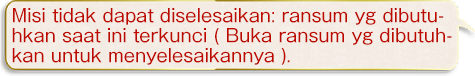
<style>
.page{position:relative;width:475px;height:76px}
.page>*{position:absolute;margin:0}
.t1{font:18px/20px "GothicMB101Pro-Regular";color:#bd0800}
</style>
<div class="page">
<p class="t1" style="left:12px;top:8px;width:440px;height:57px">Misi tidak dapat diselesaikan: ransum yg dibutu-<br>hkan saat ini terkunci ( Buka ransum yg dibutuh-<br>kan untuk menyelesaikannya ).</p>
</div>
